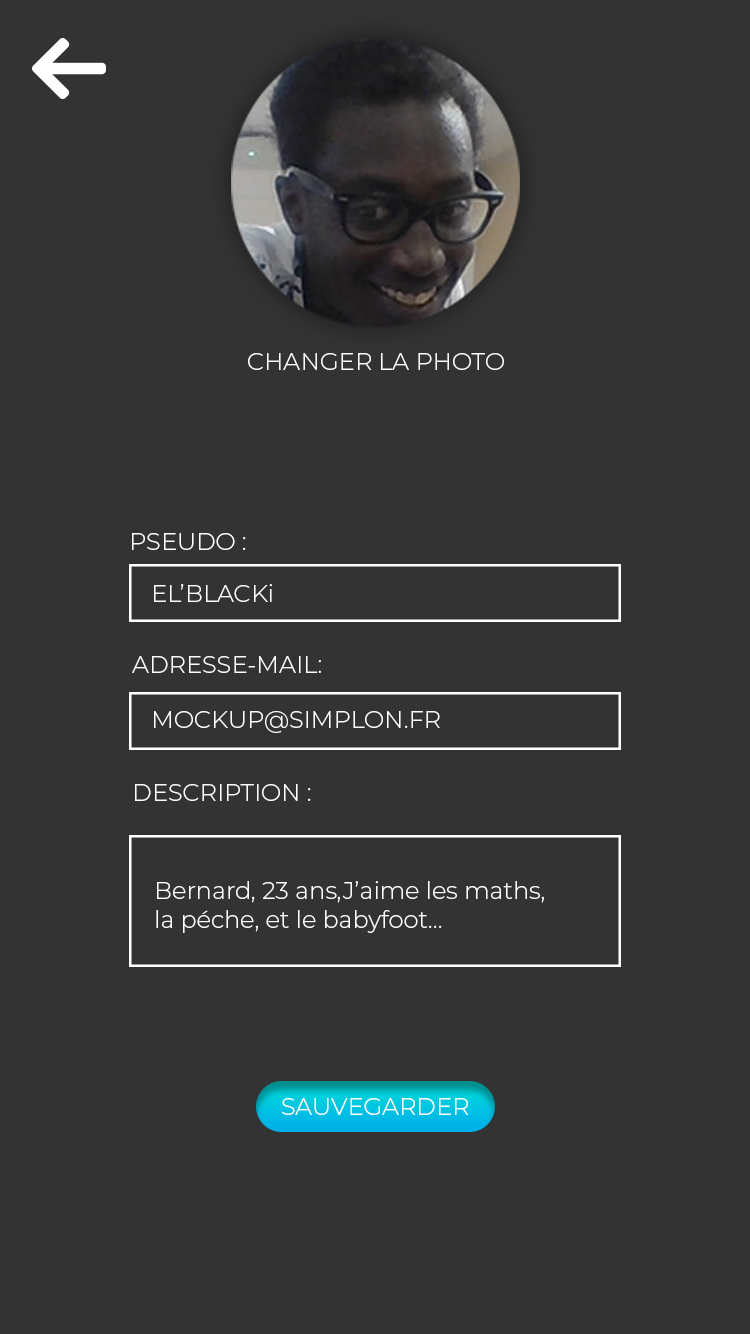
<style>
.page{position:relative;width:750px;height:1334px;background:#333333}
.page>*{position:absolute;margin:0}
.t1{font:24px "Montserrat-Light";color:#fffefe}
</style>
<div class="page">
<p class="t1" style="left:248px;top:353px;width:256px;height:17px">CHANGER LA PHOTO</p>
<p class="t1" style="left:132px;top:533px;width:114px;height:17px">PSEUDO :</p>
<p class="t1" style="left:154px;top:584px;width:118px;height:18px">EL’BLACKi</p>
<p class="t1" style="left:132px;top:656px;width:189px;height:17px">ADRESSE-MAIL:</p>
<p class="t1" style="left:154px;top:711px;width:286px;height:22px">MOCKUP@SIMPLON.FR</p>
<p class="t1" style="left:135px;top:784px;width:176px;height:17px">DESCRIPTION :</p>
<p class="t1" style="left:156px;top:881px;width:388px;height:52px">Bernard, 23 ans,J’aime les maths,<br>la péche, et le babyfoot...</p>
<p class="t1" style="left:282px;top:1098px;width:187px;height:17px">SAUVEGARDER</p>
</div>
